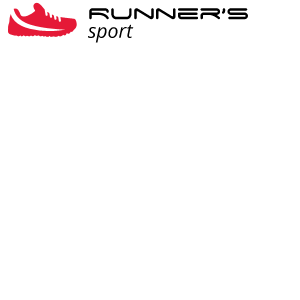
<style>
.page{position:relative;width:300px;height:300px;background:#ffffff}
.page>*{position:absolute;margin:0}
.t1{font:25px/16.7px "SpaceAge";color:#000000}
.t2{font:19.4px/16.7px "OpenSans-Italic";color:#000000}
</style>
<div class="page">
<p class="t1" style="left:88px;top:8px;width:160px;height:35px">Runner’s <br><span class="t2">sport</span></p>
</div>
